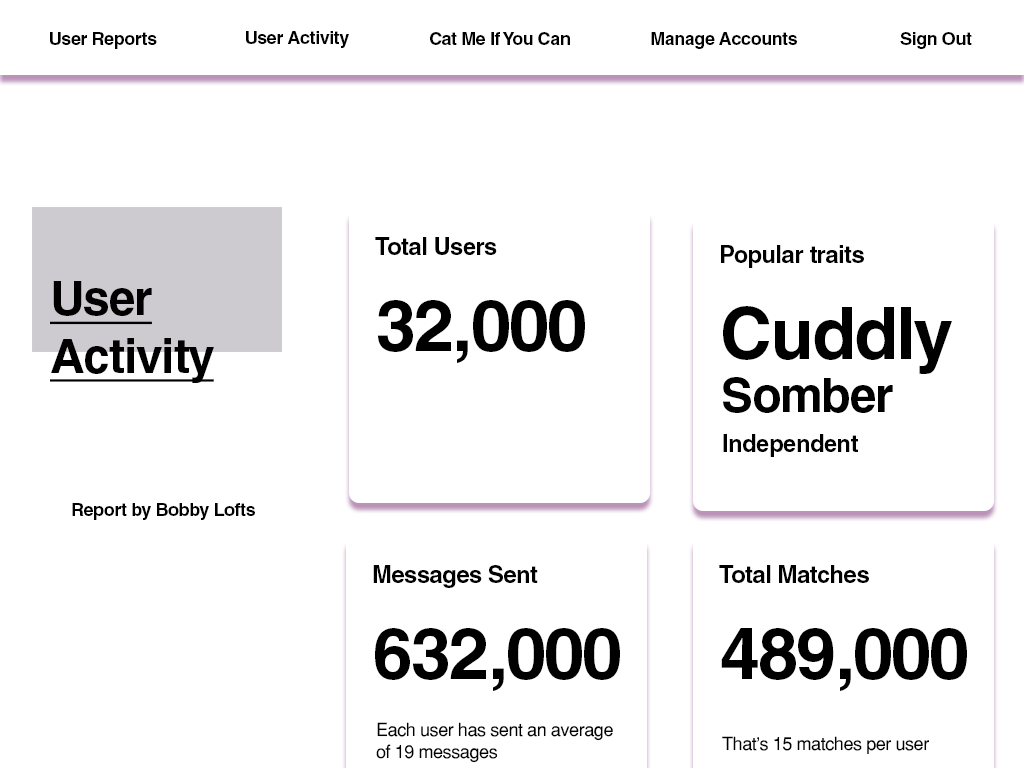
<style>
.page{position:relative;width:1024px;height:768px;background:#ffffff}
.page>*{position:absolute;margin:0}
.t1{font:18px "Helvetica-Bold";letter-spacing:-0.025em;color:#000000}
.t2{font:24px "Helvetica-Bold";letter-spacing:-0.025em;color:#000000}
.t3{font:48px "Helvetica-Bold";letter-spacing:-0.025em;color:#000000;text-decoration:underline}
.t4{font:72px "Helvetica-Bold";letter-spacing:-0.025em;color:#000000}
.t5{font:48px "Helvetica-Bold";letter-spacing:-0.025em;color:#000000}
.t6{font:18px "Helvetica-Normal";letter-spacing:-0.025em;color:#000000}
</style>
<div class="page">
<p class="t1" style="left:50px;top:32px;width:107px;height:17px">User Reports</p>
<p class="t1" style="left:246px;top:31px;width:103px;height:17px">User Activity</p>
<p class="t1" style="left:430px;top:32px;width:140px;height:13px">Cat Me If You Can</p>
<p class="t1" style="left:651px;top:32px;width:146px;height:17px">Manage Accounts</p>
<p class="t1" style="left:900px;top:32px;width:72px;height:17px">Sign Out</p>
<p class="t2" style="left:375px;top:237px;width:122px;height:18px">Total Users</p>
<p class="t2" style="left:721px;top:245px;width:143px;height:23px">Popular traits</p>
<p class="t3" style="left:50px;top:281px;width:164px;height:102px">User<br>Activity</p>
<p class="t4" style="left:378px;top:300px;width:207px;height:63px">32,000</p>
<p class="t4" style="left:723px;top:306px;width:229px;height:68px">Cuddly</p>
<p class="t5" style="left:723px;top:377px;width:170px;height:36px">Somber</p>
<p class="t2" style="left:723px;top:434px;width:135px;height:23px">Independent</p>
<p class="t1" style="left:72px;top:503px;width:183px;height:17px">Report by Bobby Lofts</p>
<p class="t2" style="left:373px;top:565px;width:165px;height:23px">Messages Sent</p>
<p class="t2" style="left:719px;top:565px;width:150px;height:18px">Total Matches</p>
<p class="t4" style="left:375px;top:628px;width:245px;height:63px">632,000</p>
<p class="t4" style="left:721px;top:628px;width:246px;height:63px">489,000</p>
<p class="t6" style="left:376px;top:722px;width:237px;height:41px">Each user has sent an average<br>of 19 messages</p>
<p class="t6" style="left:722px;top:736px;width:208px;height:18px">That’s 15 matches per user</p>
</div>
